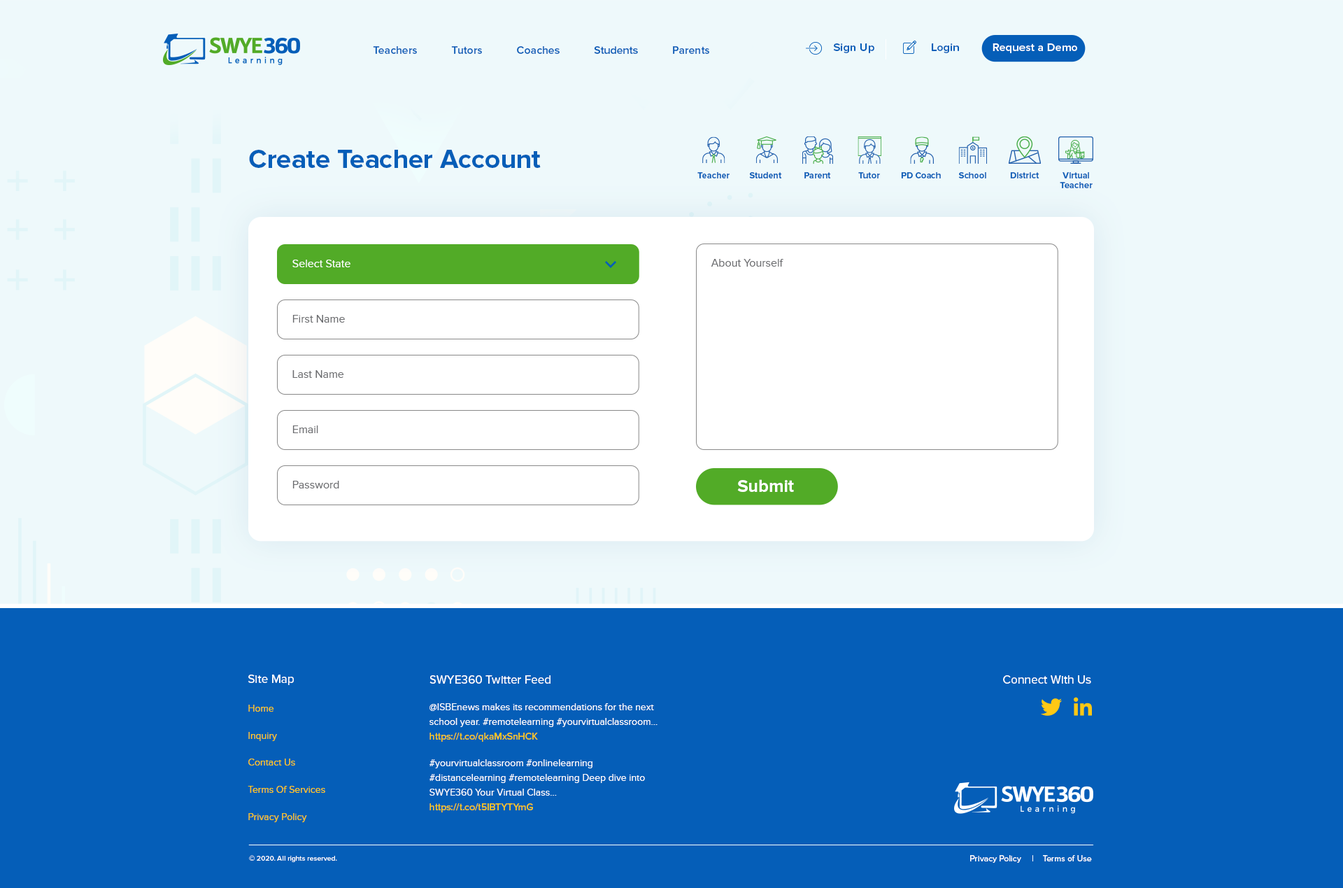
<style>
.page{position:relative;width:1343px;height:888px;background:#eef9fb}
.page>*{position:absolute;margin:0}
.t1{font:11.1px "ProximaNova-Semibold";color:#055eb8}
.t2{font:11.6px "ProximaNova-Semibold";color:#055eb8}
.t3{font:11.6px "ProximaNova-Semibold";color:#ffffff}
.t4{font:26.9px "ProximaNova-Bold";color:#055eb8}
.t5{font:9px "ProximaNova-Bold";color:#055eb8}
.t6{font:11.2px "ProximaNova-Regular";color:#ffffff}
.t7{font:11.2px "ProximaNova-Regular";color:#6d6e71}
.t8{font:17.6px "ProximaNova-Bold";color:#ffffff}
.t9{font:9.8px "ProximaNova-Regular";color:#ffc814}
.t10{font:11.9px "ProximaNova-Medium";color:#ffffff}
.t11{font:9.8px/14.7px "ProximaNova-Regular";color:#ffffff}
.t12{font:9.8px "ProximaNova-Regular";color:#ffffff}
.t13{font:9.8px/14.7px "ProximaNova-Medium";color:#ffc814}
.t14{font:7.2px "ProximaNova-Medium";color:#ffffff}
.t15{font:8.5px "ProximaNova-Medium";color:#ffffff}
</style>
<div class="page">
<p class="t1" style="left:373px;top:46px;width:336px;height:8px">Teachers            Tutors            Coaches            Students            Parents</p>
<p class="t2" style="left:833px;top:43px;width:41px;height:10px">Sign Up</p>
<p class="t2" style="left:932px;top:43px;width:27px;height:10px">Login</p>
<p class="t3" style="left:993px;top:43px;width:84px;height:10px">Request a Demo</p>
<p class="t4" style="left:249px;top:150px;width:292px;height:18px">Create Teacher Account</p>
<p class="t5" style="left:697px;top:172px;width:33px;height:6px">Teacher</p>
<p class="t5" style="left:749px;top:171px;width:33px;height:7px">Student</p>
<p class="t5" style="left:805px;top:172px;width:26px;height:6px">Parent</p>
<p class="t5" style="left:858px;top:172px;width:22px;height:6px">Tutor</p>
<p class="t5" style="left:901px;top:172px;width:40px;height:6px">PD Coach</p>
<p class="t5" style="left:958px;top:172px;width:28px;height:6px">School</p>
<p class="t5" style="left:1010px;top:172px;width:30px;height:6px">District</p>
<p class="t5" style="left:1060px;top:172px;width:33px;height:16px;text-align:center">Virtual<br>Teacher</p>
<p class="t6" style="left:292px;top:260px;width:58px;height:7px">Select State</p>
<p class="t7" style="left:711px;top:259px;width:73px;height:8px">About Yourself</p>
<p class="t7" style="left:292px;top:315px;width:53px;height:8px">First Name</p>
<p class="t7" style="left:292px;top:370px;width:52px;height:8px">Last Name</p>
<p class="t7" style="left:292px;top:425px;width:26px;height:8px">Email</p>
<p class="t7" style="left:292px;top:481px;width:47px;height:7px">Password</p>
<p class="t8" style="left:737px;top:479px;width:57px;height:13px">Submit</p>
<p class="t9" style="left:248px;top:674px;width:77px;height:148px"><span class="t10">Site Map<br></span>Home<br>Inquiry<br>Contact Us<br>Terms Of Services<br>Privacy Policy</p>
<p class="t11" style="left:430px;top:675px;width:228px;height:137px"><span class="t10">SWYE360 Twitter Feed<br></span><span class="t12">@IS</span>BEnews makes its recommendations for the next school year. #remotelearning #yourvirtualclassroom… <span class="t13">https://t.co/qkaMxSnHCK<br></span>#yourvirtualclassroom #onlinelearning #distancelearning #remotelearning Deep dive into SWYE360 Your Virtual Class… <br><span class="t13">https://t.co/t5IBTYTYmG</span></p>
<p class="t10" style="left:1003px;top:675px;width:88px;height:8px">Connect With Us</p>
<p class="t14" style="left:249px;top:855px;width:88px;height:7px">© 2020. All rights reserved.</p>
<p class="t15" style="left:970px;top:855px;width:122px;height:8px">Privacy Policy     |    Terms of Use</p>
</div>
